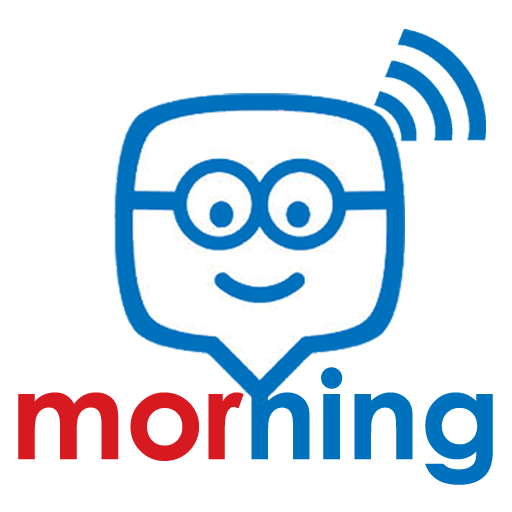
<style>
.page{position:relative;width:512px;height:512px;background:#ffffff}
.page>*{position:absolute;margin:0}
.t1{font:122.4px "CenturyGothic-Bold";color:#0071bc}
.t2{font:122.4px "CenturyGothic-Bold";color:#d71920}
</style>
<div class="page">
<p class="t1" style="left:18px;top:367px;width:475px;height:118px"><span class="t2">mor</span>ning</p>
</div>
